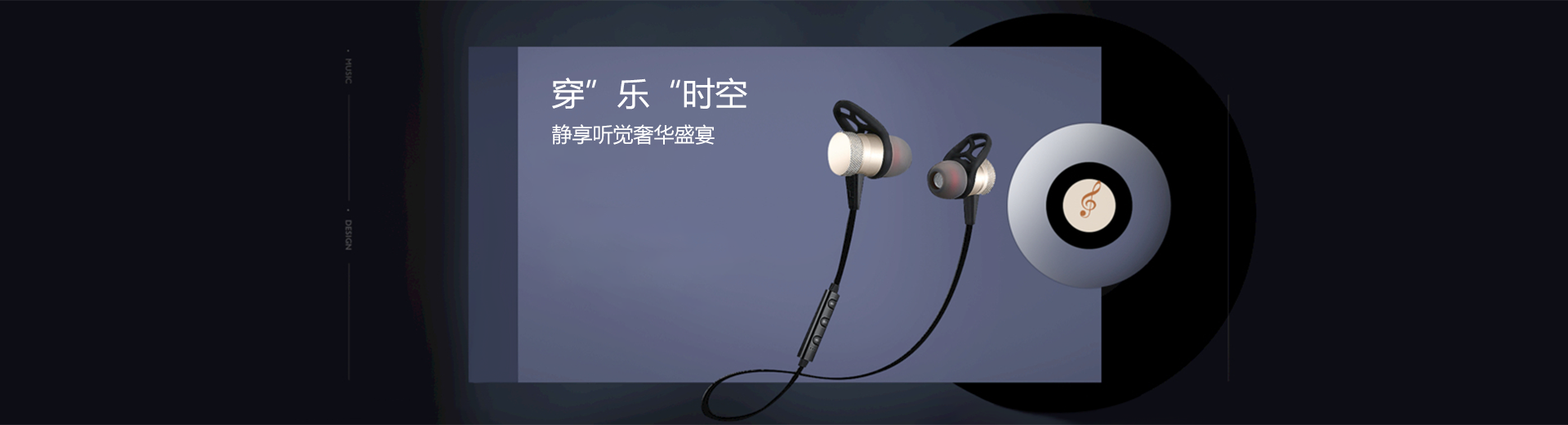
<style>
.page{position:relative;width:1568px;height:425px;background:#0d0d15}
.page>*{position:absolute;margin:0}
.t1{font:32.7px "MicrosoftYaHei";color:#ffffff}
.t2{font:20.4px "MicrosoftYaHei";color:#ffffff}
</style>
<div class="page">
<p class="t1" style="left:552px;top:78px;width:195px;height:31px">穿”乐“时空</p>
<p class="t2" style="left:552px;top:124px;width:163px;height:21px">静享听觉奢华盛宴</p>
</div>
